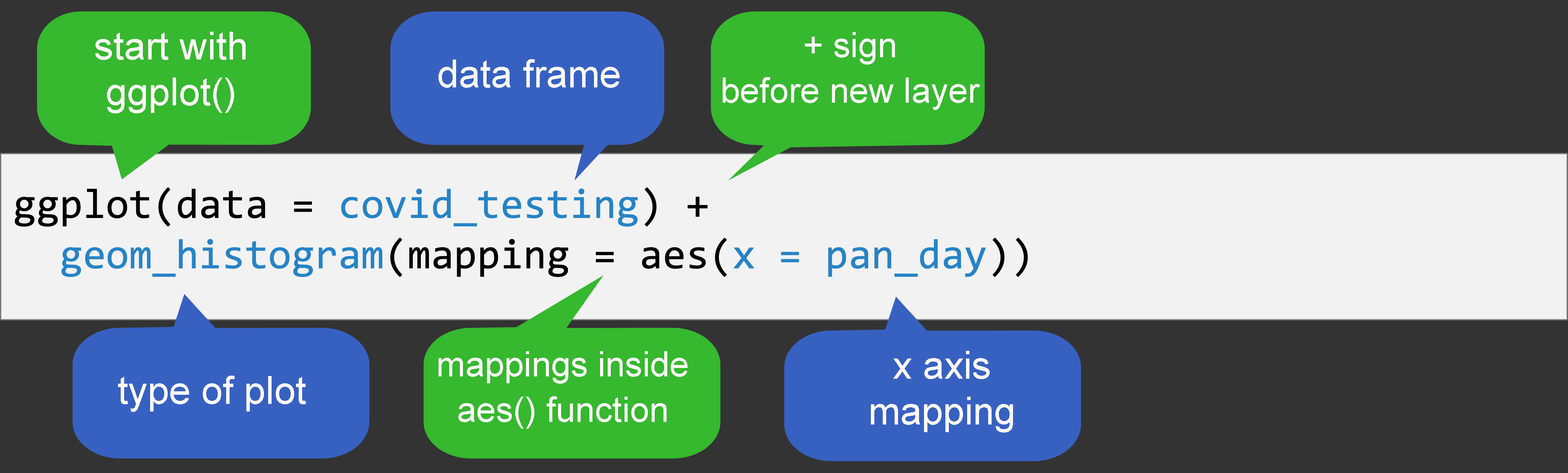
<style>
.page{position:relative;width:1568px;height:473px;background:#333333}
.page>*{position:absolute;margin:0}
.t1{font:38.5px/45.5px "ArialMT";color:#fff9f9}
.t2{font:35px/45.5px "ArialMT";color:#fff9f9}
.t3{font:38.5px "ArialMT";color:#fff9f9}
</style>
<div class="page">
<p class="t1" style="left:95px;top:32px;width:151px;height:81px;text-align:center">start with ggplot()</p>
<p class="t2" style="left:723px;top:32px;width:257px;height:78px;text-align:center">+ sign<br>before new layer</p>
<p class="t3" style="left:439px;top:59px;width:181px;height:29px">data frame</p>
<p class="t2" style="left:439px;top:351px;width:249px;height:78px;text-align:center">mappings inside aes() function</p>
<p class="t1" style="left:871px;top:351px;width:142px;height:82px;text-align:center">x axis mapping</p>
<p class="t3" style="left:118px;top:376px;width:188px;height:36px">type of plot</p>
</div>
